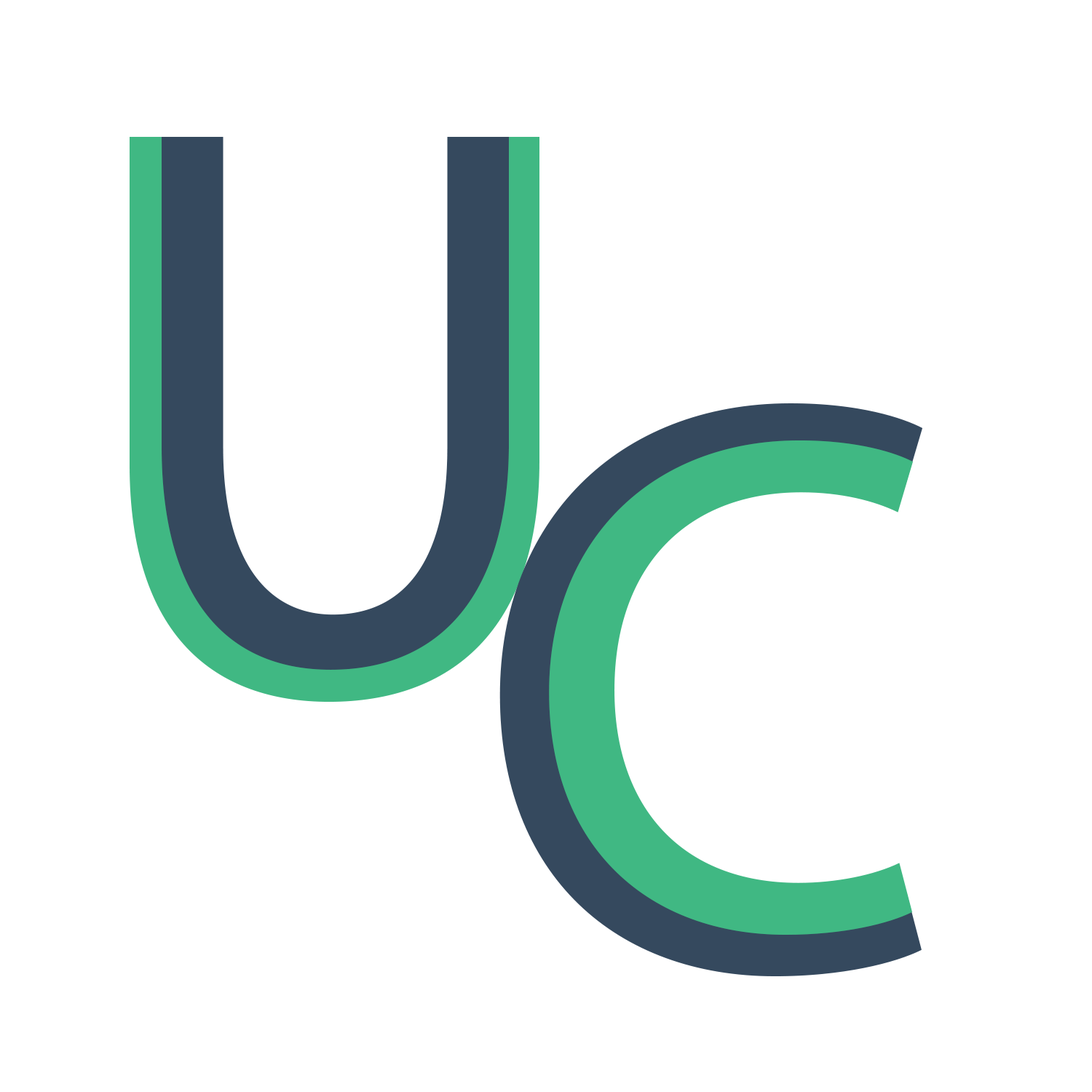
<style>
.page{position:relative;width:1092px;height:1092px;background:#ffffff}
.page>*{position:absolute;margin:0}
.t1{font:825.1px "MyriadPro-Regular";letter-spacing:-0.075em}
.t2{font:777.4px "MyriadPro-Regular";letter-spacing:-0.075em;color:#35495e;scale:0.9 1}
.t3{font:825.1px "MyriadPro-Regular";letter-spacing:-0.075em;color:#35495e}
.t4{font:710.5px "MyriadPro-Regular";letter-spacing:-0.075em;color:#40b883}
</style>
<div class="page">
<p class="t1" style="left:130px;top:137px;width:409px;height:566px">U</p>
<p class="t2" style="left:162px;top:137px;width:347px;height:533px">U</p>
<p class="t3" style="left:499px;top:403px;width:423px;height:573px">C</p>
<p class="t4" style="left:549px;top:440px;width:364px;height:495px">C</p>
</div>
